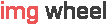
<style>
.page{position:relative;width:107px;height:25px;background:#ffffff}
.page>*{position:absolute;margin:0}
.t1{font:22.5px "font140";color:#3e3e3e;font-weight:bold}
.t2{font:22.5px "font140";color:#ec5555;font-weight:bold}
</style>
<div class="page">
<p class="t1" style="left:1px;top:1px;width:105px;height:23px"><span class="t2">img </span>wheel</p>
</div>
